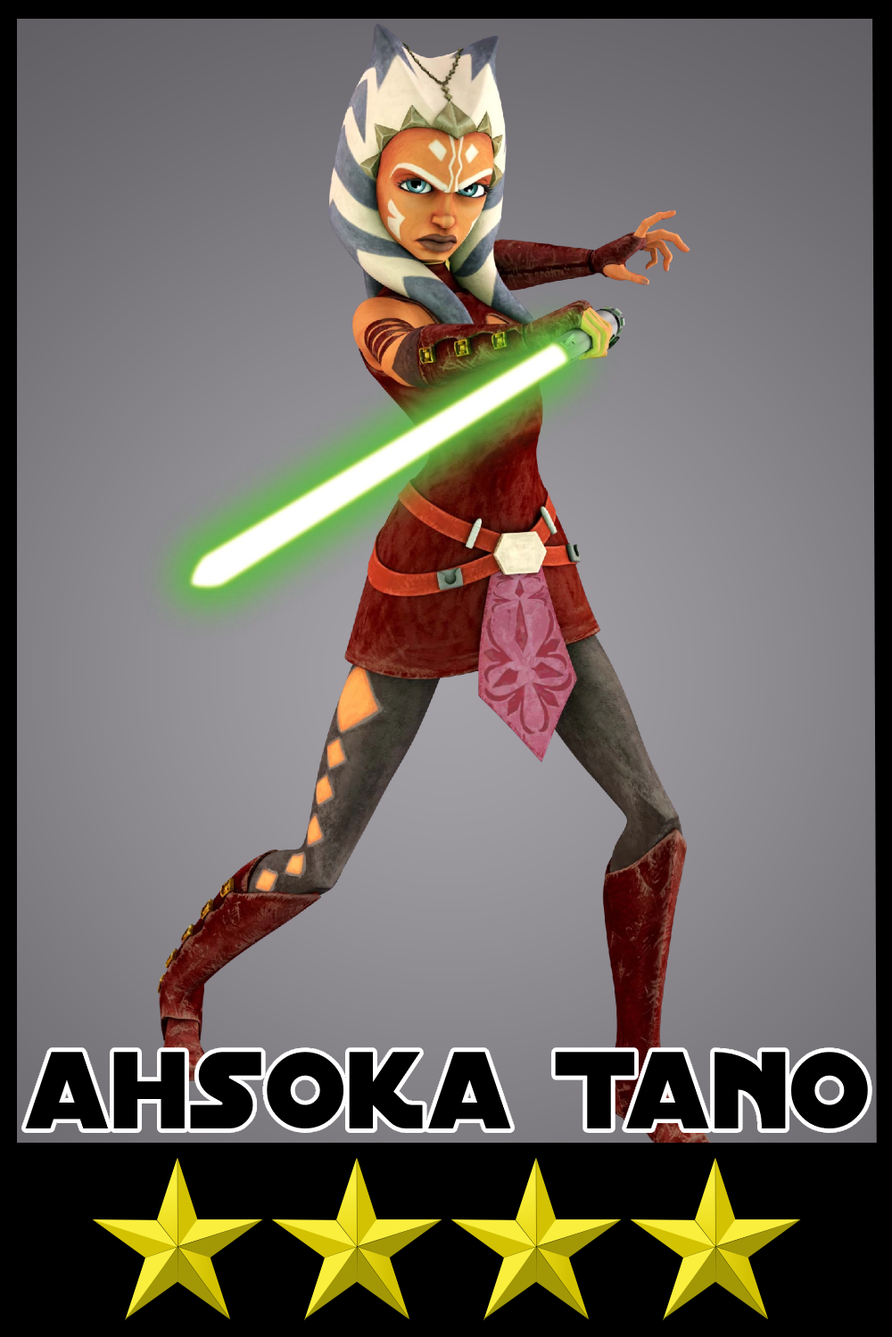
<style>
.page{position:relative;width:892px;height:1337px}
.page>*{position:absolute;margin:0}
.t1{font:117.7px "DistantGalaxy";color:#000000}
</style>
<div class="page">
<p class="t1" style="left:25px;top:1052px;width:843px;height:77px">ahsoka Tano</p>
</div>
